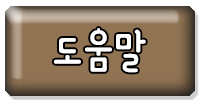
<style>
.page{position:relative;width:200px;height:100px;background:#907353}
.page>*{position:absolute;margin:0}
.t1{font:50px "YanoljaYacheR";color:#ffffff}
</style>
<div class="page">
<p class="t1" style="left:54px;top:28px;width:92px;height:45px">도움말</p>
</div>
